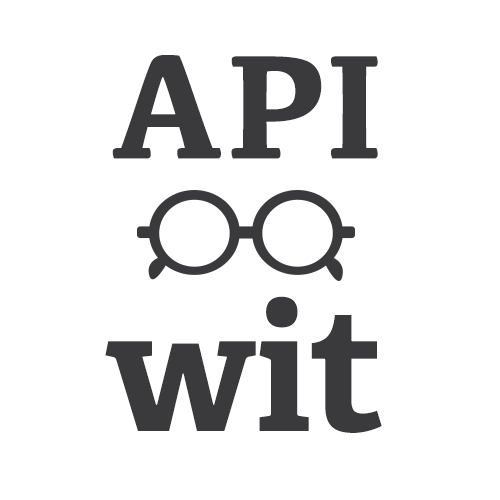
<style>
.page{position:relative;width:500px;height:500px;background:#ffffff}
.page>*{position:absolute;margin:0}
.t1{font:153px "Kefa-Bold";color:#3a3a3c}
.t2{font:172px "AdelleBasic-Bold";color:#3a3a3c}
</style>
<div class="page">
<p class="t1" style="left:112px;top:55px;width:266px;height:104px">API</p>
<p class="t2" style="left:105px;top:296px;width:277px;height:137px">wit</p>
</div>
